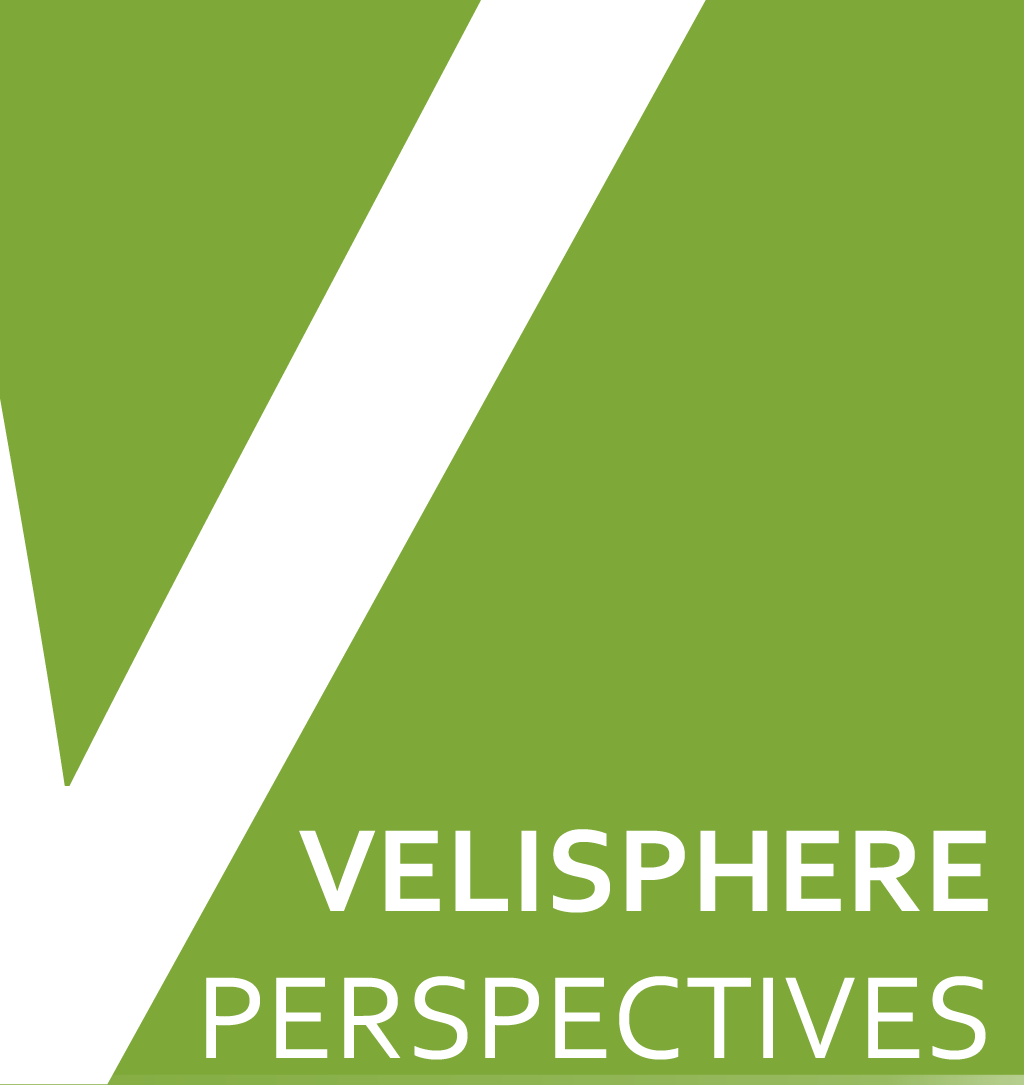
<style>
.page{position:relative;width:1024px;height:1085px;background:#7ea939}
.page>*{position:absolute;margin:0}
.t1{font:122.8px "Corbel";color:#ffffff}
.t2{font:122.8px "Corbel-Bold";color:#ffffff}
</style>
<div class="page">
<p class="t1" style="left:206px;top:829px;width:782px;height:231px;text-align:right"><span class="t2">VELISPHERE<br></span>PERSPECTIVES</p>
</div>
